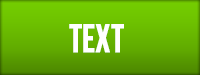
<style>
.page{position:relative;width:200px;height:75px}
.page>*{position:absolute;margin:0}
.t1{font:38.8px "BebasNeue";color:#ffffff;font-weight:bold;scale:0.87 1}
</style>
<div class="page">
<p class="t1" style="left:69px;top:24px;width:55px;height:29px">TEXT</p>
</div>
